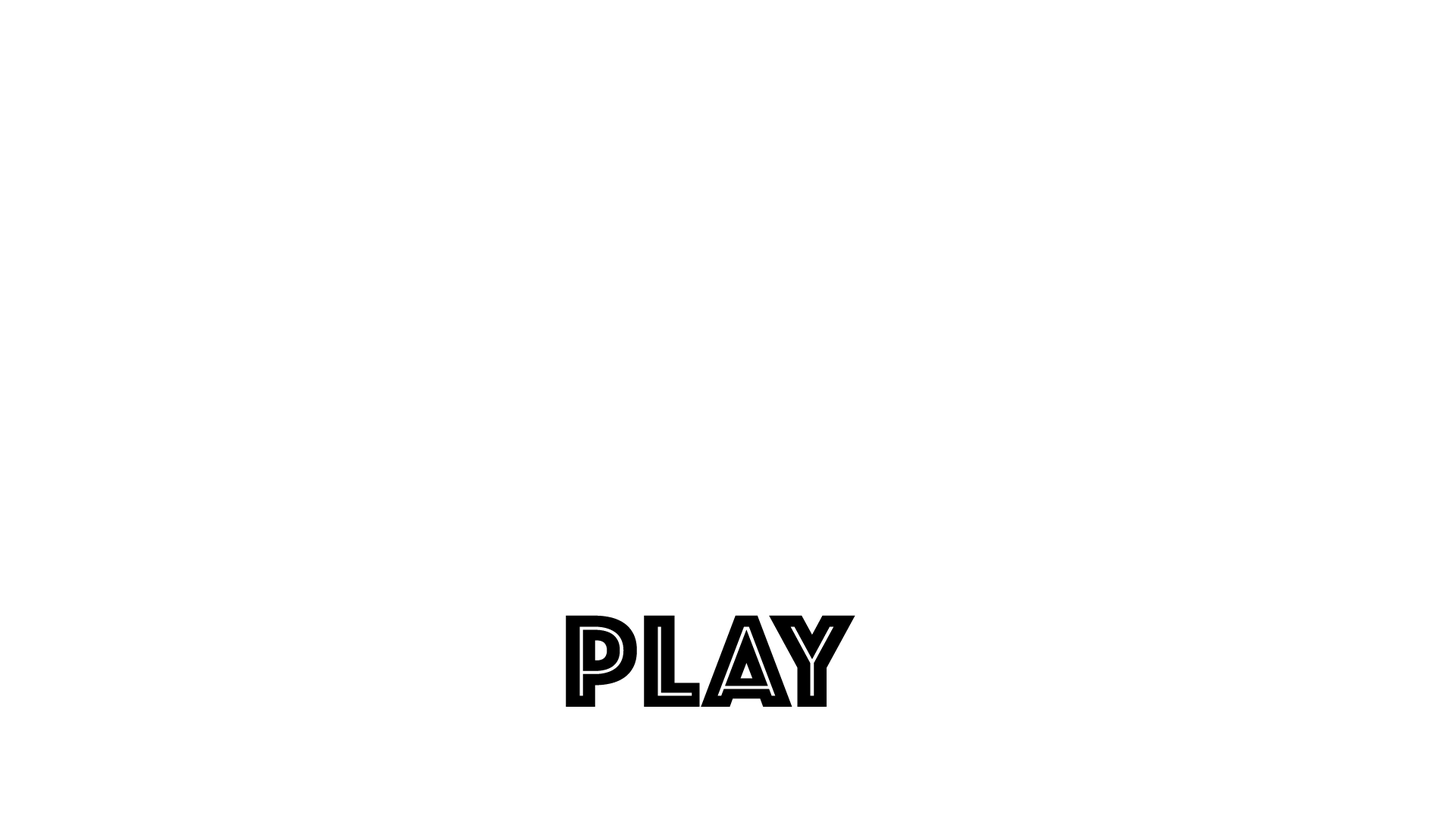
<style>
.page{position:relative;width:1456px;height:819px;background:#ffffff}
.page>*{position:absolute;margin:0}
.t1{font:136.5px "Phosphate-Inline";color:#000000}
</style>
<div class="page">
<p class="t1" style="left:566px;top:615px;width:289px;height:92px">PLAY</p>
</div>
